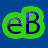
<style>
.page{position:relative;width:48px;height:48px;background:#014693}
.page>*{position:absolute;margin:0}
.t1{font:34.2px "MyriadPro-Regular"}
</style>
<div class="page">
<p class="t1" style="left:7px;top:11px;width:33px;height:23px">eB</p>
</div>
